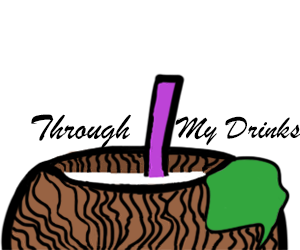
<style>
.page{position:relative;width:300px;height:250px;background:#ffffff}
.page>*{position:absolute;margin:0}
.t1{font:37.5px "BrushScriptMT";color:#000000}
.t2{font:33.3px "BrushScriptMT";color:#000000}
</style>
<div class="page">
<p class="t1" style="left:31px;top:114px;width:100px;height:35px">Through</p>
<p class="t2" style="left:175px;top:116px;width:126px;height:30px">My Drinks</p>
</div>
